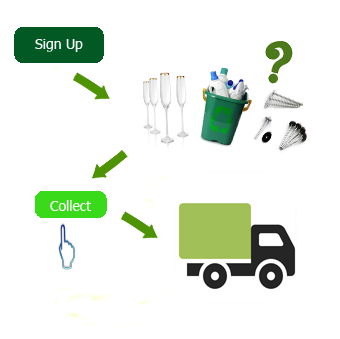
<style>
.page{position:relative;width:340px;height:339px;background:#ffffff}
.page>*{position:absolute;margin:0}
.t1{font:14px "Tahoma";color:#f8faf9}
.t2{font:14px "Tahoma";color:#fafcf9}
</style>
<div class="page">
<p class="t1" style="left:35px;top:39px;width:48px;height:13px">Sign Up</p>
<p class="t2" style="left:50px;top:200px;width:41px;height:11px">Collect</p>
</div>
